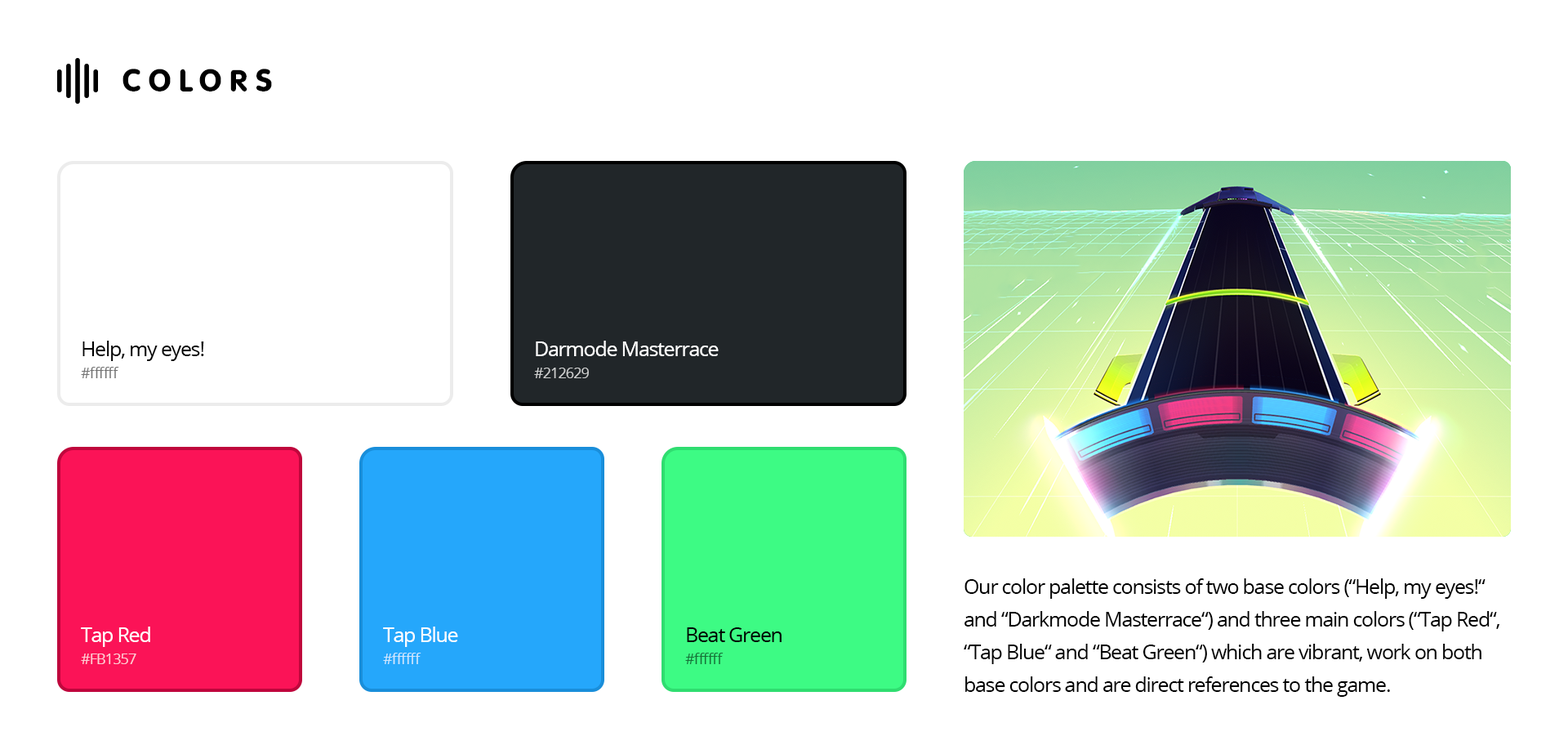
<style>
.page{position:relative;width:1568px;height:754px;background:#ffffff}
.page>*{position:absolute;margin:0}
.t1{font:32.7px "QTVagaRound-Bold";letter-spacing:0.2em;color:#000000}
.t2{font:20.4px "OpenSans";letter-spacing:-0.05em;color:#000000}
.t3{font:20.4px "OpenSans";letter-spacing:-0.05em;color:#ffffff}
.t4{font:14.7px "OpenSans";letter-spacing:-0.05em;color:#737373}
.t5{font:14.7px "OpenSans";letter-spacing:-0.05em;color:#cecfcf}
.t6{font:20.4px/32.7px "OpenSans";letter-spacing:-0.05em;color:#000000}
.t7{font:14.7px "OpenSans";letter-spacing:-0.05em;color:#fecdd6}
.t8{font:14.7px "OpenSans";letter-spacing:-0.05em;color:#cfe7fe}
.t9{font:14.7px "OpenSans";letter-spacing:-0.05em;color:#167238}
</style>
<div class="page">
<p class="t1" style="left:122px;top:69px;width:150px;height:22px">COLORS</p>
<p class="t2" style="left:82px;top:341px;width:122px;height:20px">Help, my eyes!</p>
<p class="t3" style="left:536px;top:341px;width:183px;height:15px">Darmode Masterrace</p>
<p class="t4" style="left:81px;top:367px;width:38px;height:11px">#ffffff</p>
<p class="t5" style="left:534px;top:368px;width:55px;height:10px">#212629</p>
<p class="t6" style="left:964px;top:578px;width:535px;height:119px">Our color palette consists of two base colors (“Help, my eyes!“<br>and “Darkmode Masterrace“) and three main colors (“Tap Red“, <br>“Tap Blue“ and “Beat Green“) which are vibrant, work on both<br>base colors and are direct references to the game.</p>
<p class="t3" style="left:81px;top:626px;width:69px;height:21px">Tap Red</p>
<p class="t3" style="left:383px;top:626px;width:75px;height:21px">Tap Blue</p>
<p class="t2" style="left:687px;top:627px;width:95px;height:15px">Beat Green</p>
<p class="t7" style="left:81px;top:653px;width:55px;height:11px">#FB1357</p>
<p class="t8" style="left:383px;top:653px;width:38px;height:11px">#ffffff</p>
<p class="t9" style="left:685px;top:653px;width:39px;height:11px">#ffffff</p>
</div>
